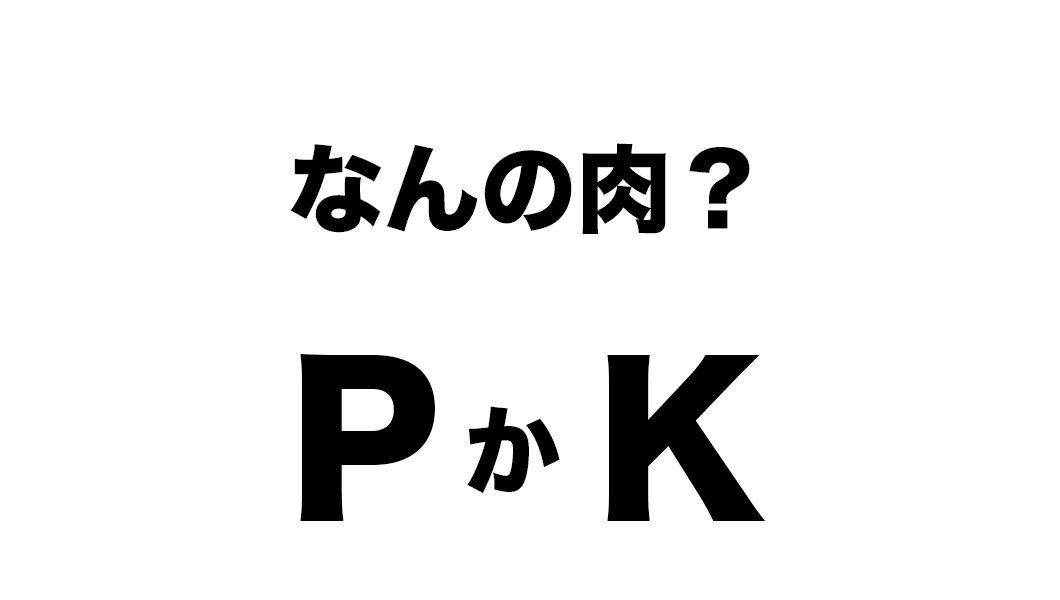
<style>
.page{position:relative;width:1060px;height:600px;background:#ffffff}
.page>*{position:absolute;margin:0}
.t1{font:96px "HiraKakuStdN-W8";color:#010000}
.t2{font:200px "HiraKakuStdN-W8";color:#000000}
.t3{font:96px "HiraKakuStdN-W8";color:#000000}
</style>
<div class="page">
<p class="t1" style="left:290px;top:143px;width:460px;height:91px">なんの肉？</p>
<p class="t2" style="left:300px;top:354px;width:135px;height:167px">PP</p>
<p class="t2" style="left:607px;top:355px;width:159px;height:166px">K</p>
<p class="t3" style="left:467px;top:406px;width:93px;height:88px">か</p>
</div>
